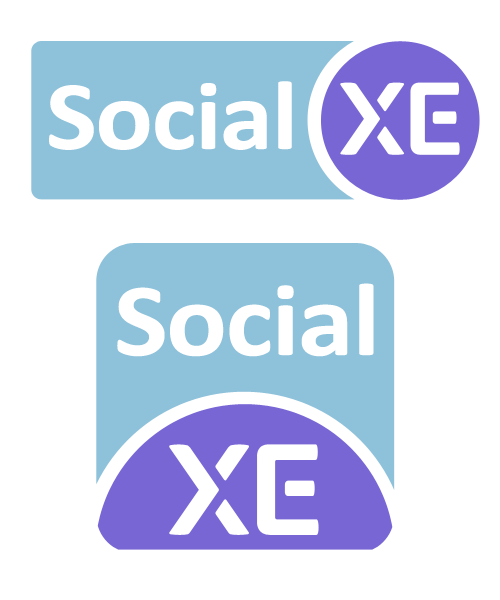
<style>
.page{position:relative;width:500px;height:600px;background:#ffffff}
.page>*{position:absolute;margin:0}
.t1{font:99.2px "Calibri-Bold";letter-spacing:-0.015em;color:#ffffff;scale:1.09 1}
.t2{font:104.7px "Calibri-Bold";letter-spacing:-0.015em;color:#ffffff;scale:1.09 1}
</style>
<div class="page">
<p class="t1" style="left:49px;top:81px;width:243px;height:69px">Social</p>
<p class="t2" style="left:117px;top:283px;width:257px;height:74px">Social</p>
</div>
